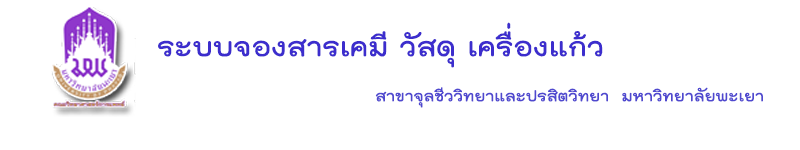
<style>
.page{position:relative;width:800px;height:150px;background:#ffffff}
.page>*{position:absolute;margin:0}
.t1{font:37.5px "THKodchasal-Bold";color:#3c2dcd}
.t2{font:20.8px "THKodchasal-Bold";color:#4f48cf}
</style>
<div class="page">
<p class="t1" style="left:158px;top:22px;width:445px;height:46px">ระบบจองสารเคมี วัสดุ เครื่องแก้ว</p>
<p class="t2" style="left:375px;top:87px;width:388px;height:21px">สาขาจุลชีววิทยาและปรสิตวิทยา  มหาวิทยาลัยพะเยา</p>
</div>
